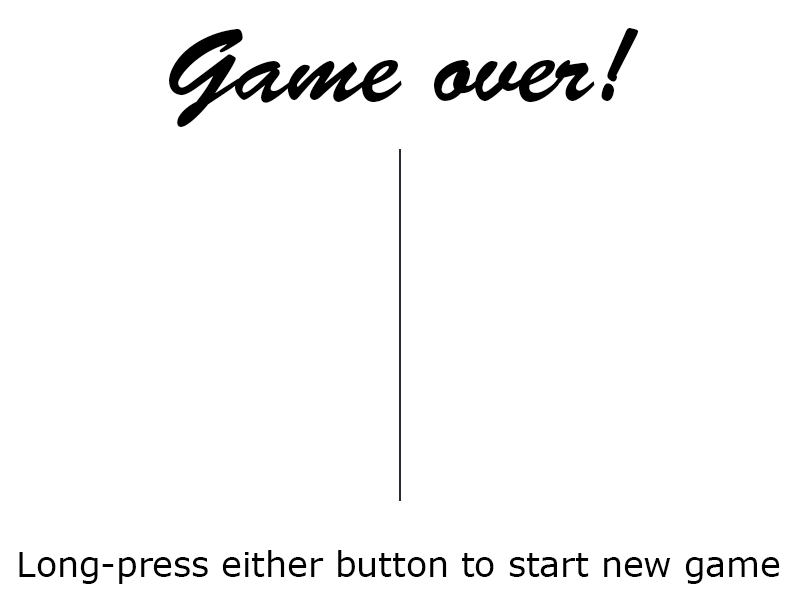
<style>
.page{position:relative;width:800px;height:600px;background:#ffffff}
.page>*{position:absolute;margin:0}
.t1{font:104px "BrushScriptStd";color:#000000}
.t2{font:34.7px "Verdana";color:#000000}
</style>
<div class="page">
<p class="t1" style="left:169px;top:28px;width:470px;height:99px">Game over!</p>
<p class="t2" style="left:19px;top:550px;width:761px;height:34px">Long-press either button to start new game</p>
</div>
